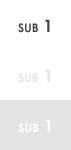
<style>
.page{position:relative;width:71px;height:150px;background:#ffffff}
.page>*{position:absolute;margin:0}
.t1{font:17px "CenturyGothic-Bold";color:#424242;font-variant:small-caps}
.t2{font:17px "CenturyGothic-Bold";color:#e4e4e4;font-variant:small-caps}
.t3{font:17px "CenturyGothic-Bold";color:#ffffff;font-variant:small-caps}
</style>
<div class="page">
<p class="t1" style="left:18px;top:19px;width:32px;height:14px">sub 1</p>
<p class="t2" style="left:18px;top:69px;width:32px;height:14px">sub 1</p>
<p class="t3" style="left:18px;top:119px;width:32px;height:14px">sub 1</p>
</div>
